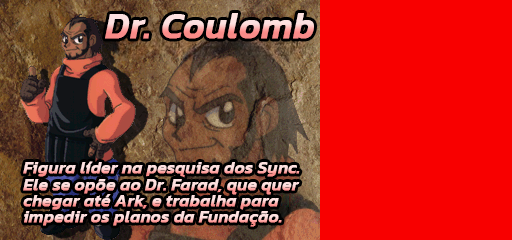
<style>
.page{position:relative;width:512px;height:240px;background:#f80000}
.page>*{position:absolute;margin:0}
.t1{font:36px "Kanit-MediumItalic";font-weight:bold}
.t2{font:17px "Kanit-MediumItalic";font-weight:bold}
</style>
<div class="page">
<p class="t1" style="left:105px;top:13px;width:209px;height:26px">Dr. Coulomb</p>
<p class="t2" style="left:23px;top:161px;width:277px;height:17px">Figura líder na pesquisa dos Sync.</p>
<p class="t2" style="left:23px;top:179px;width:277px;height:16px">Ele se opõe ao Dr. Farad, que quer</p>
<p class="t2" style="left:23px;top:194px;width:256px;height:16px">chegar até Ark, e trabalha para</p>
<p class="t2" style="left:24px;top:211px;width:258px;height:16px">impedir os planos da Fundação.</p>
</div>
